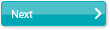
<style>
.page{position:relative;width:110px;height:30px;background:#4dc2cb}
.page>*{position:absolute;margin:0}
.t1{font:11px "MyriadPro-Regular";color:#ffffff}
</style>
<div class="page">
<p class="t1" style="left:12px;top:10px;width:21px;height:8px">Next</p>
</div>
